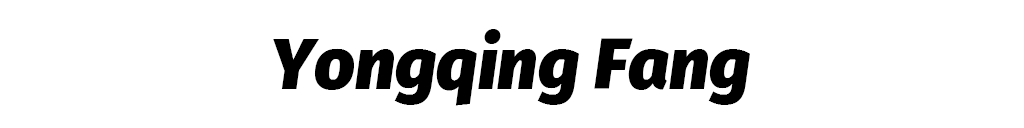
<style>
.page{position:relative;width:1024px;height:128px;background:#ffffff}
.page>*{position:absolute;margin:0}
.t1{font:71.8px "FiraSans-BlackItalic";color:#000000}
</style>
<div class="page">
<p class="t1" style="left:273px;top:29px;width:477px;height:77px">Yongqing Fang</p>
</div>
